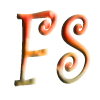
<style>
.page{position:relative;width:100px;height:100px;background:#ffffff}
.page>*{position:absolute;margin:0}
.t1{font:108px "CurlzMT";font-weight:bold;font-style:italic;scale:0.81 1}
.t2{font:97.2px "CurlzMT";font-weight:bold;font-style:italic;scale:0.81 1}
</style>
<div class="page">
<p class="t1" style="left:14px;top:10px;width:77px;height:77px">F<span class="t2">S</span></p>
</div>
